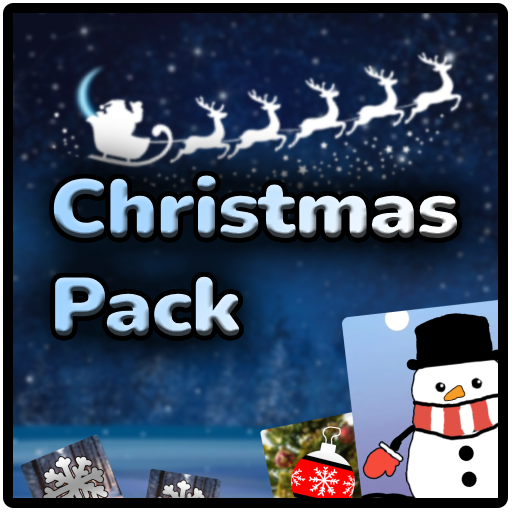
<style>
.page{position:relative;width:512px;height:512px}
.page>*{position:absolute;margin:0}
.t1{font:81.5px "NunitoHeavy-Regular"}
</style>
<div class="page">
<p class="t1" style="left:53px;top:175px;width:405px;height:161px">Christmas<br>Pack</p>
</div>
